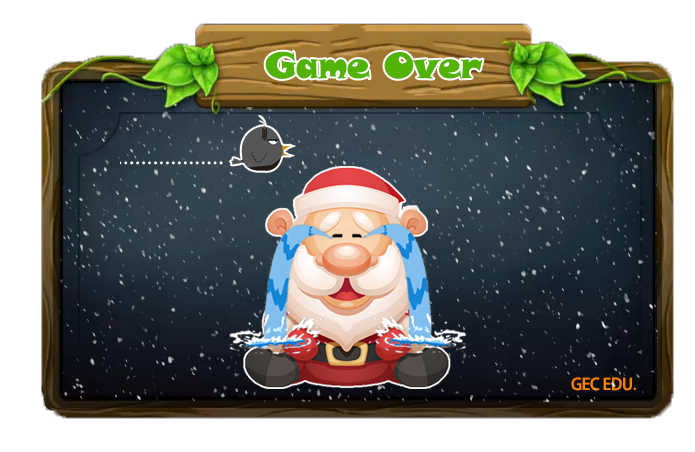
<style>
.page{position:relative;width:695px;height:452px;background:#ffffff}
.page>*{position:absolute;margin:0}
.t1{font:36px "SnapITC-Regular";letter-spacing:-0.02em;color:#52b305}
.t2{font:16px "AdobeHeitiStd-Regular";letter-spacing:-0.02em;color:#fb8200}
</style>
<div class="page">
<p class="t1" style="left:265px;top:51px;width:218px;height:28px">Game Over</p>
<p class="t2" style="left:571px;top:377px;width:66px;height:14px">GEC EDU.</p>
</div>
